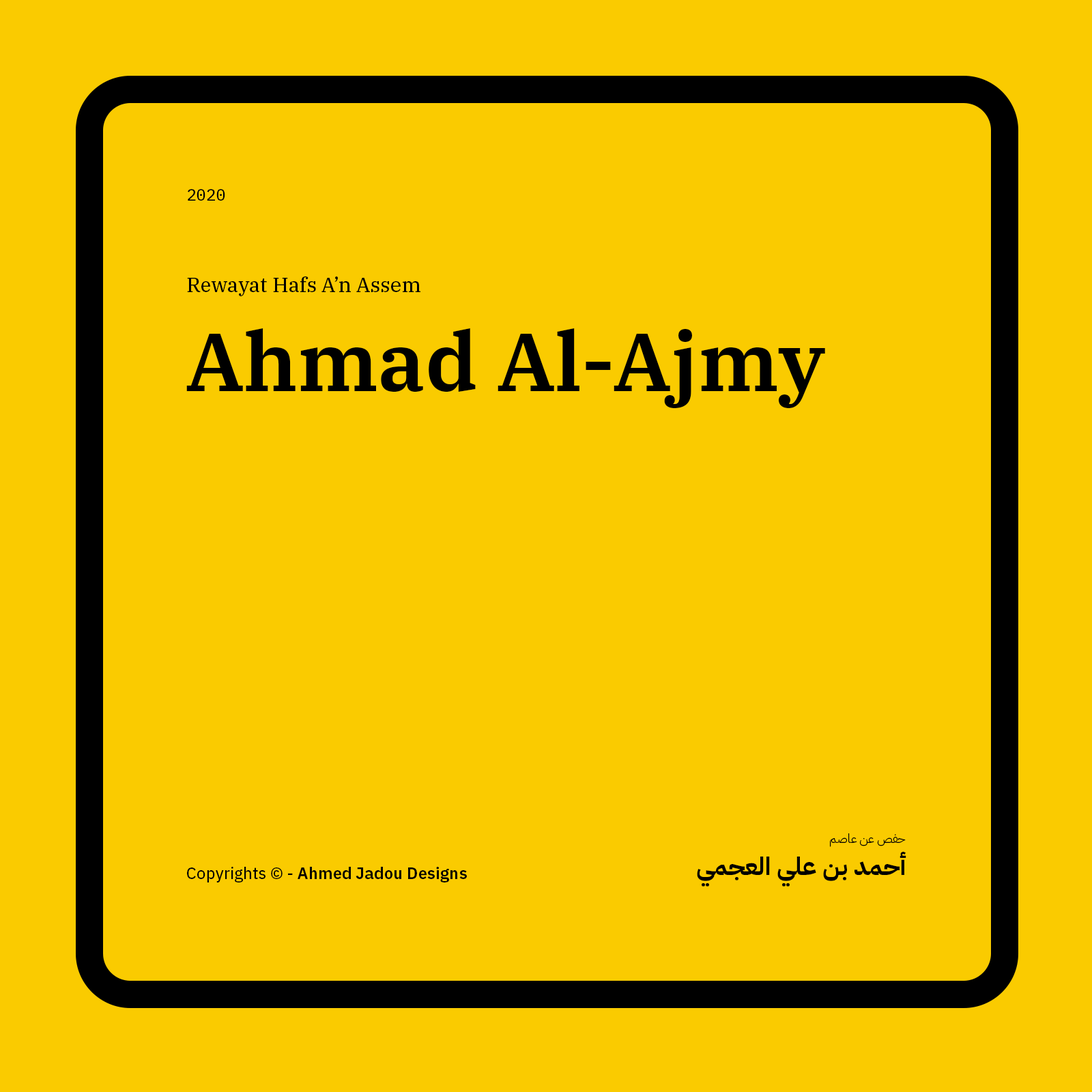
<style>
.page{position:relative;width:1092px;height:1092px;background:#facb00}
.page>*{position:absolute;margin:0}
.t1{font:16.4px "IBMPlexMono-Text";color:#000000}
.t2{font:20.5px "IBMPlexSerif-Text";color:#000000}
.t3{font:81.9px "IBMPlexSerif-SemiBold";color:#000000}
.t4{font:12.3px "IBMPlexArabic-Light";color:#000000}
.t5{font:24.6px "IBMPlexArabic-Bold";color:#000000}
.t6{font:16.4px "IBMPlexSans-SemiBold";color:#000000}
.t7{font:16.4px "IBMPlexSans-Text";color:#000000}
</style>
<div class="page">
<p class="t1" style="left:188px;top:189px;width:37px;height:12px">2020</p>
<p class="t2" style="left:187px;top:276px;width:233px;height:20px">Rewayat Hafs A’n Assem</p>
<p class="t3" style="left:186px;top:328px;width:639px;height:80px">Ahmad Al-Ajmy</p>
<p class="t4" style="left:830px;top:833px;width:76px;height:14px">حفص عن عاصم</p>
<p class="t5" style="left:697px;top:852px;width:209px;height:35px">أحمد بن علي العجمي</p>
<p class="t6" style="left:187px;top:867px;width:280px;height:15px"><span class="t7">Copyrights © - </span>Ahmed Jadou Designs</p>
</div>
